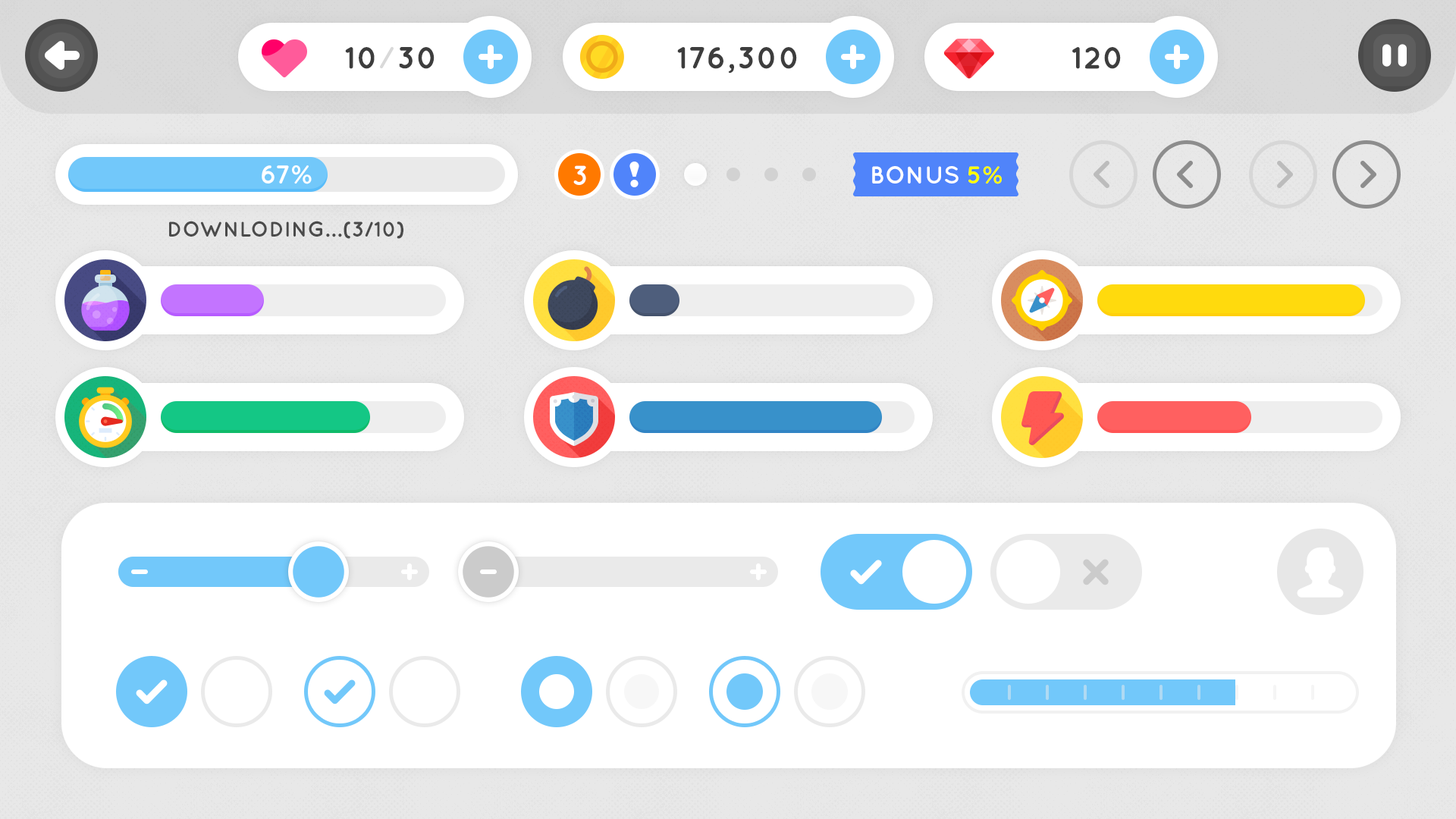
<style>
.page{position:relative;width:1456px;height:819px;background:#ffffff}
.page>*{position:absolute;margin:0}
.t1{font:30.3px "Quicksand-Bold";color:#3d3d3d}
.t2{font:25.8px "Quicksand-Bold";color:#ffffff}
.t3{font:27.3px "Quicksand-Bold";color:#ffffff;text-transform:uppercase}
.t4{font:24.3px "Quicksand-Bold";color:#ffffff;text-transform:uppercase}
.t5{font:24.3px "Quicksand-Bold";color:#fffd00;text-transform:uppercase}
.t6{font:21.2px "Quicksand-Bold";color:#4b4b4b;text-transform:uppercase}
</style>
<div class="page">
<p class="t1" style="left:345px;top:47px;width:90px;height:22px">10  30</p>
<p class="t1" style="left:677px;top:47px;width:120px;height:27px">176,300</p>
<p class="t1" style="left:1072px;top:47px;width:49px;height:22px">120</p>
<p class="t2" style="left:262px;top:165px;width:50px;height:19px">67%</p>
<p class="t3" style="left:573px;top:165px;width:13px;height:20px">3</p>
<p class="t4" style="left:872px;top:166px;width:130px;height:18px">Bonus <span class="t5">5%</span></p>
<p class="t6" style="left:169px;top:221px;width:234px;height:18px">Downloding...(3/10)</p>
</div>
